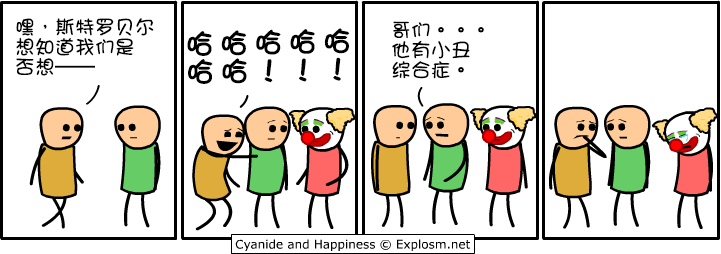
<style>
.page{position:relative;width:721px;height:254px;background:#ffffff}
.page>*{position:absolute;margin:0}
.t1{font:20px/20px "DFGirl";color:#000000}
.t2{font:28px/28px "DFGirl";letter-spacing:0.2em;color:#000000;font-weight:bold}
</style>
<div class="page">
<p class="t1" style="left:16px;top:18px;width:138px;height:58px">嘿，斯特罗贝尔<br>想知道我们是<br>否想——</p>
<p class="t2" style="left:187px;top:28px;width:163px;height:56px;rotate:-1deg">哈哈哈哈哈<br>哈哈！！！</p>
<p class="t1" style="left:392px;top:21px;width:92px;height:58px">哥们。。。<br>他有小丑<br>综合症。</p>
</div>
